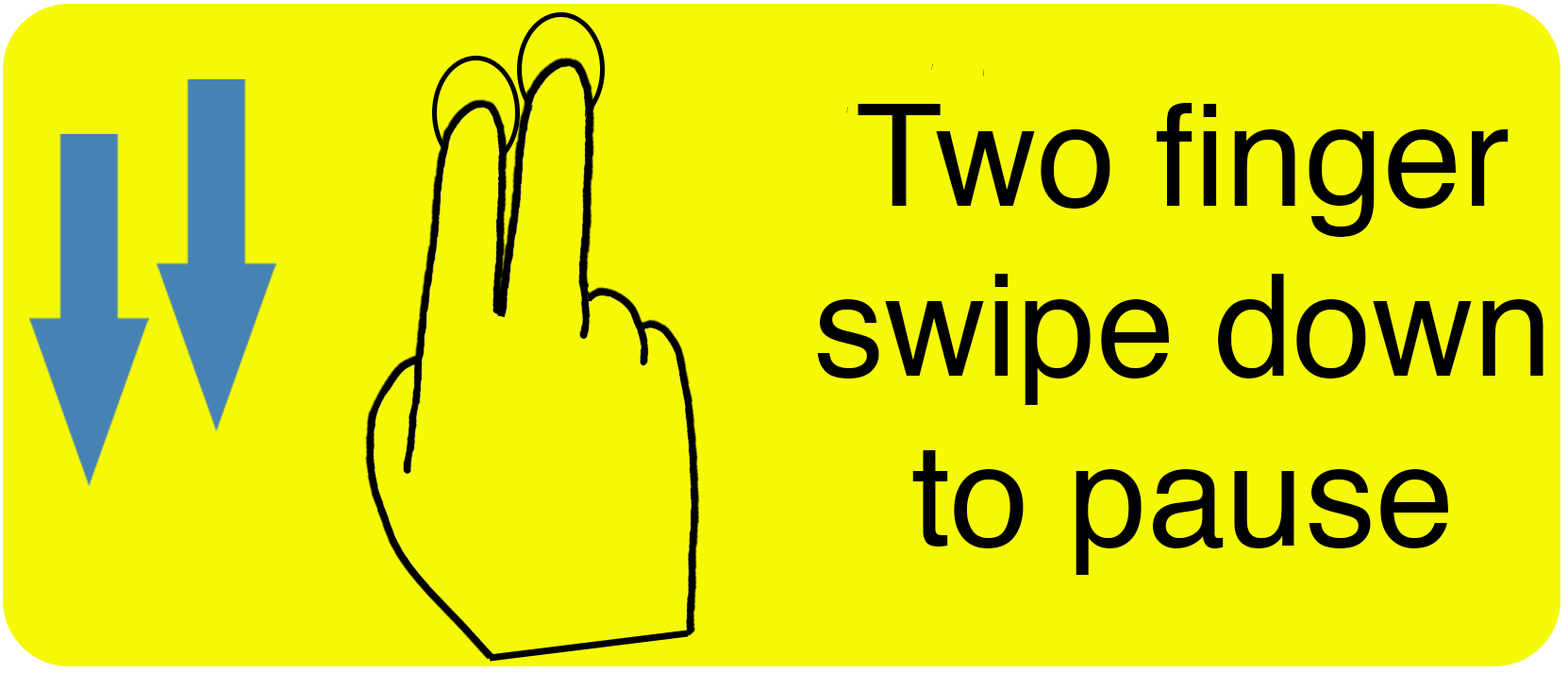
<style>
.page{position:relative;width:1568px;height:673px;background:#f6f906}
.page>*{position:absolute;margin:0}
.t1{font:141.5px "Helvetica";color:#000000}
</style>
<div class="page">
<p class="t1" style="left:817px;top:103px;width:726px;height:472px;text-align:center">Two finger<br>swipe down<br>to pause</p>
</div>
